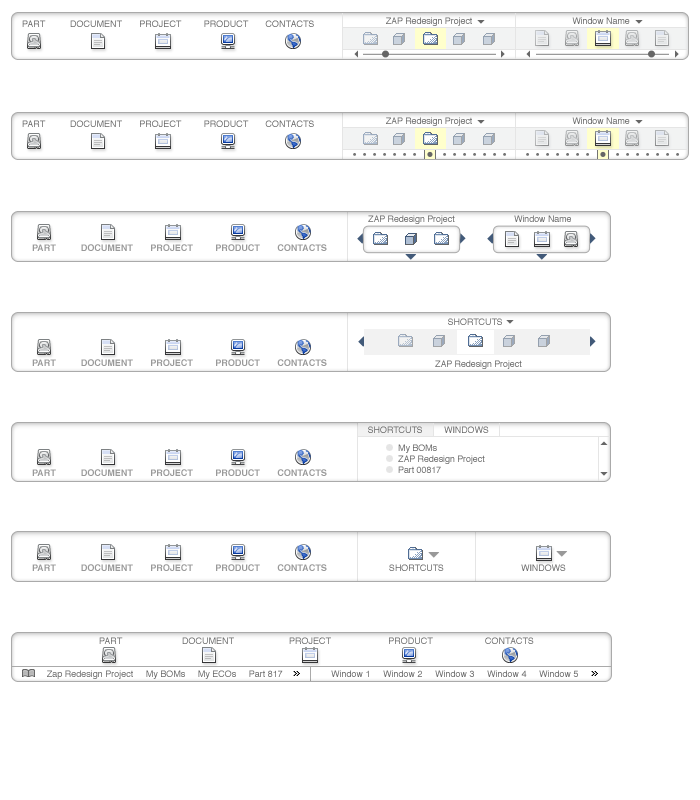
<style>
.page{position:relative;width:700px;height:800px;background:#ffffff}
.page>*{position:absolute;margin:0}
.t1{font:9px "Helvetica";letter-spacing:-0.01em;color:#666666}
.t2{font:9px "Helvetica";color:#666666}
.t3{font:9px "Helvetica-Bold";color:#999999}
.t4{font:9px "Helvetica";letter-spacing:-0.01em}
</style>
<div class="page">
<p class="t1" style="left:386px;top:17px;width:86px;height:9px">ZAP Redesign Project</p>
<p class="t1" style="left:572px;top:17px;width:58px;height:7px">Window Name</p>
<p class="t2" style="left:22px;top:20px;width:292px;height:7px">PART          DOCUMENT       PROJECT         PRODUCT       CONTACTS</p>
<p class="t2" style="left:22px;top:120px;width:292px;height:7px">PART          DOCUMENT       PROJECT         PRODUCT       CONTACTS</p>
<p class="t1" style="left:386px;top:117px;width:86px;height:9px">ZAP Redesign Project</p>
<p class="t1" style="left:572px;top:117px;width:58px;height:7px">Window Name</p>
<p class="t1" style="left:368px;top:215px;width:87px;height:9px">ZAP Redesign Project</p>
<p class="t1" style="left:514px;top:215px;width:57px;height:7px">Window Name</p>
<p class="t3" style="left:32px;top:244px;width:295px;height:7px">PART          DOCUMENT       PROJECT         PRODUCT       CONTACTS</p>
<p class="t4" style="left:448px;top:318px;width:54px;height:7px">SHORTCUTS</p>
<p class="t3" style="left:32px;top:359px;width:295px;height:7px">PART          DOCUMENT       PROJECT         PRODUCT       CONTACTS</p>
<p class="t1" style="left:435px;top:360px;width:87px;height:9px">ZAP Redesign Project</p>
<p class="t4" style="left:368px;top:426px;width:54px;height:7px">SHORTCUTS</p>
<p class="t1" style="left:444px;top:426px;width:45px;height:7px">WINDOWS</p>
<p class="t1" style="left:398px;top:444px;width:87px;height:29px">My BOMs<br>ZAP Redesign Project<br>Part 00817</p>
<p class="t3" style="left:32px;top:469px;width:295px;height:7px">PART          DOCUMENT       PROJECT         PRODUCT       CONTACTS</p>
<p class="t3" style="left:32px;top:564px;width:295px;height:7px">PART          DOCUMENT       PROJECT         PRODUCT       CONTACTS</p>
<p class="t4" style="left:389px;top:564px;width:55px;height:7px">SHORTCUTS</p>
<p class="t1" style="left:521px;top:564px;width:45px;height:7px">WINDOWS</p>
<p class="t2" style="left:99px;top:637px;width:435px;height:7px">PART                        DOCUMENT                      PROJECT                       PRODUCT                     CONTACTS</p>
<p class="t2" style="left:47px;top:670px;width:236px;height:9px">Zap Redesign Project     My BOMs     My ECOs     Part 817</p>
<p class="t2" style="left:331px;top:670px;width:247px;height:7px">Window 1     Window 2     Window 3     Window 4     Window 5</p>
</div>
